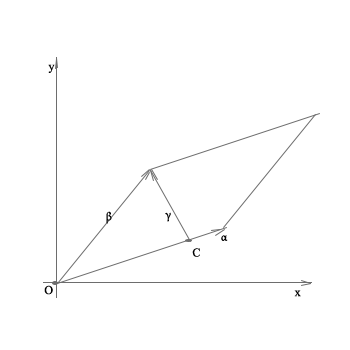
<style>
.page{position:relative;width:350px;height:350px;background:#ffffff}
.page>*{position:absolute;margin:0}
.t1{font:12px "MongolianBaiti";color:#000000}
.t2{font:12px "MinionPro-Regular";color:#000000}
</style>
<div class="page">
<p class="t1" style="left:48px;top:64px;width:7px;height:9px">y</p>
<p class="t2" style="left:106px;top:211px;width:6px;height:13px">β</p>
<p class="t2" style="left:165px;top:212px;width:6px;height:10px">γ</p>
<p class="t2" style="left:221px;top:235px;width:7px;height:6px">α</p>
<p class="t1" style="left:192px;top:248px;width:8px;height:9px">C</p>
<p class="t1" style="left:44px;top:285px;width:9px;height:10px">O</p>
<p class="t1" style="left:294px;top:290px;width:7px;height:7px">x</p>
</div>
